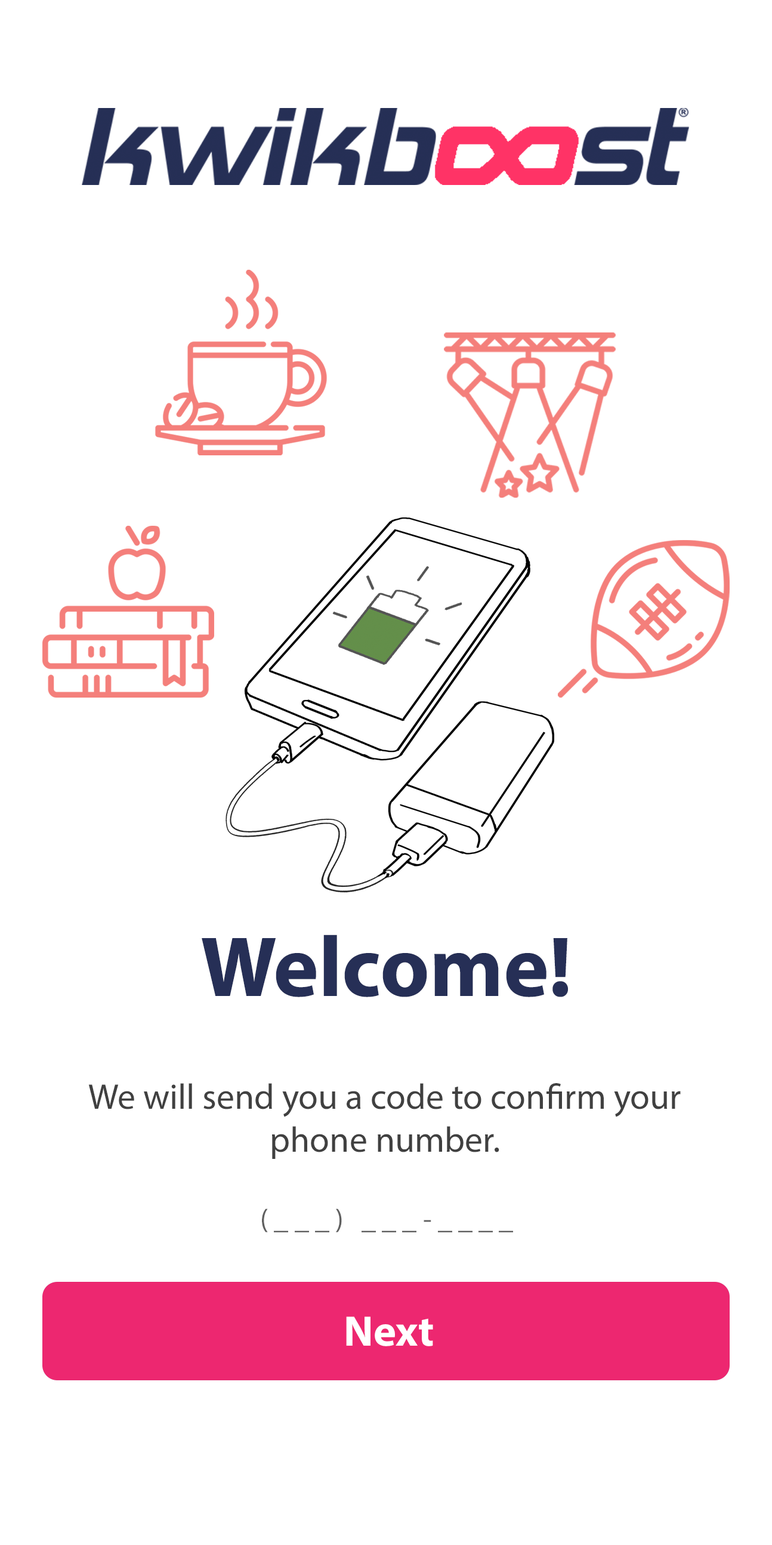
<style>
.page{position:relative;width:772px;height:1545px;background:#ffffff}
.page>*{position:absolute;margin:0}
.t1{font:85.9px "MyriadPro-Bold";color:#262f56}
.t2{font:35.8px "MyriadPro-Regular";color:#404040}
.t3{font:28.6px "MyriadPro-Regular";color:#606060}
.t4{font:43px "MyriadPro-Bold";color:#ffffff}
</style>
<div class="page">
<p class="t1" style="left:202px;top:934px;width:366px;height:63px">Welcome!</p>
<p class="t2" style="left:88px;top:1083px;width:593px;height:76px;text-align:center">We will send you a code to confirm your phone number.</p>
<p class="t3" style="left:262px;top:1208px;width:251px;height:24px">( _ _ _ )   _ _ _ - _ _ _ _</p>
<p class="t4" style="left:346px;top:1316px;width:87px;height:30px">Next</p>
</div>
